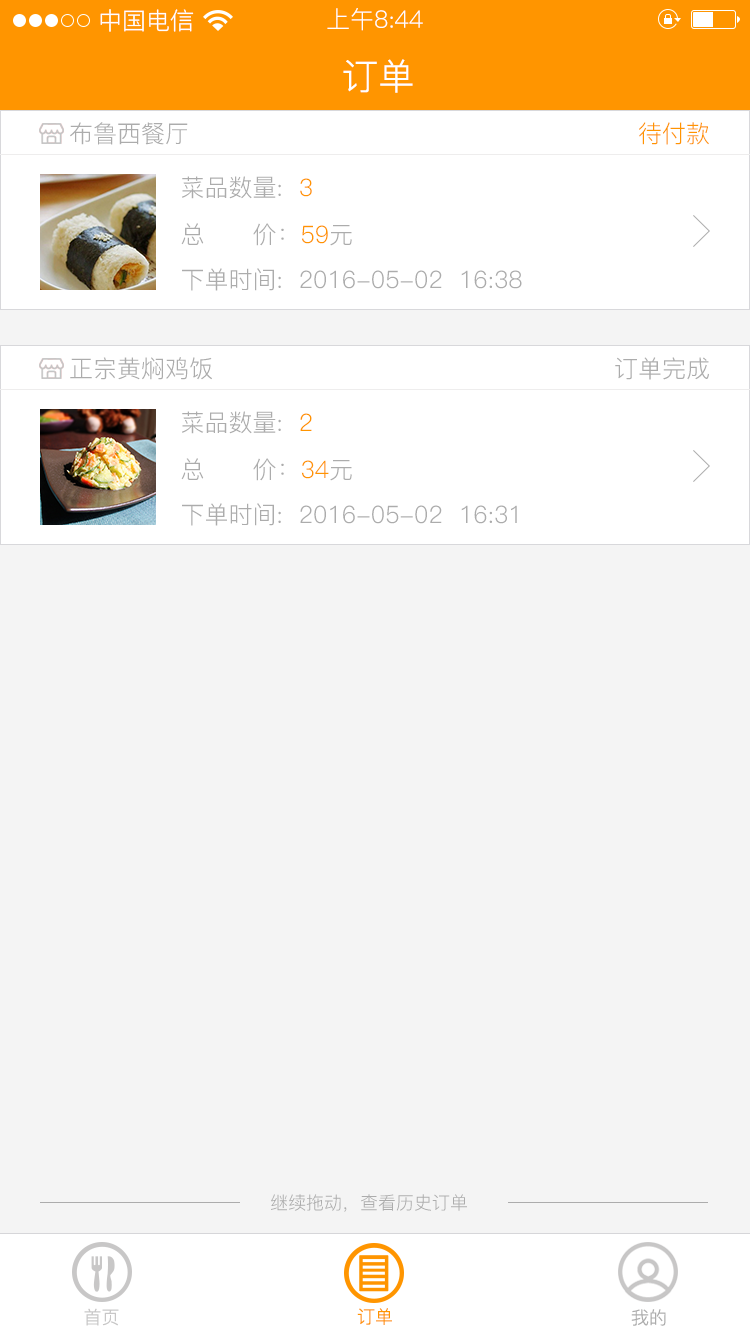
<style>
.page{position:relative;width:750px;height:1334px;background:#f4f4f4}
.page>*{position:absolute;margin:0}
.t1{font:24px "PingFang-SC-Regular";color:#ffffff}
.t2{font:36px "PingFang-SC-Regular";letter-spacing:0.01em;color:#ffffff}
.t3{font:24px "PingFang-SC-Regular";color:#acacac}
.t4{font:24px "PingFang-SC-Regular";color:#ff9500}
.t5{font:18px "PingFang-SC-Regular";color:#acacac}
.t6{font:18px "PingFang-SC-Regular";color:#c8c7c7}
.t7{font:18px "PingFang-SC-Regular";color:#ff9500}
</style>
<div class="page">
<p class="t1" style="left:100px;top:9px;width:94px;height:23px">中国电信</p>
<p class="t1" style="left:327px;top:8px;width:96px;height:23px">上午8:44</p>
<p class="t2" style="left:343px;top:59px;width:70px;height:34px">订单</p>
<p class="t3" style="left:70px;top:122px;width:118px;height:23px">布鲁西餐厅</p>
<p class="t4" style="left:639px;top:122px;width:70px;height:23px">待付款</p>
<p class="t3" style="left:182px;top:176px;width:130px;height:23px">菜品数量: <span class="t4"> 3</span></p>
<p class="t3" style="left:181px;top:223px;width:171px;height:23px">总      价：<span class="t4">59</span>元</p>
<p class="t3" style="left:182px;top:268px;width:340px;height:23px">下单时间:  2016-05-02  16:38</p>
<p class="t3" style="left:70px;top:357px;width:142px;height:23px">正宗黄焖鸡饭</p>
<p class="t3" style="left:615px;top:357px;width:94px;height:23px">订单完成</p>
<p class="t3" style="left:182px;top:411px;width:130px;height:23px">菜品数量: <span class="t4"> 2</span></p>
<p class="t3" style="left:181px;top:458px;width:171px;height:23px">总      价：<span class="t4">34</span>元</p>
<p class="t3" style="left:182px;top:503px;width:335px;height:23px">下单时间:  2016-05-02  16:31</p>
<p class="t5" style="left:271px;top:1194px;width:196px;height:18px">继续拖动，查看历史订单</p>
<p class="t6" style="left:84px;top:1308px;width:35px;height:18px">首页</p>
<p class="t7" style="left:357px;top:1308px;width:35px;height:17px">订单</p>
<p class="t5" style="left:631px;top:1309px;width:35px;height:17px">我的</p>
</div>
